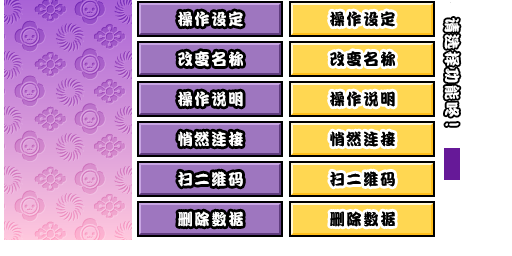
<style>
.page{position:relative;width:512px;height:256px;background:#ffffff}
.page>*{position:absolute;margin:0}
.t1{font:16px "DFPKanTingLiuW9";letter-spacing:0.1em;color:#ffffff;scale:0.96 1}
.t2{font:16px "DFPKanTingLiuW9";letter-spacing:0.1em;color:#000000;scale:0.96 1}
.t3{font:16px "DFPKanTingLiuW9";letter-spacing:-0.02em;color:#ffffff;scale:0.96 1}
</style>
<div class="page">
<p class="t1" style="left:178px;top:11px;width:65px;height:16px">操作设定</p>
<p class="t2" style="left:330px;top:11px;width:65px;height:16px">操作设定</p>
<p class="t1" style="left:444px;top:18px;width:16px;height:108px;rotate:90deg">请选择功能<span class="t3">咚！</span></p>
<p class="t1" style="left:178px;top:51px;width:65px;height:16px">改变名称</p>
<p class="t2" style="left:330px;top:51px;width:65px;height:16px">改变名称</p>
<p class="t1" style="left:178px;top:91px;width:65px;height:16px">操作说明</p>
<p class="t2" style="left:330px;top:91px;width:65px;height:16px">操作说明</p>
<p class="t1" style="left:178px;top:131px;width:65px;height:16px">悄然连接</p>
<p class="t2" style="left:330px;top:131px;width:65px;height:16px">悄然连接</p>
<p class="t1" style="left:178px;top:171px;width:65px;height:16px">扫二维码</p>
<p class="t2" style="left:330px;top:171px;width:65px;height:16px">扫二维码</p>
<p class="t1" style="left:178px;top:211px;width:65px;height:16px">删除数据</p>
<p class="t2" style="left:330px;top:211px;width:65px;height:16px">删除数据</p>
</div>
